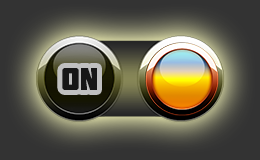
<style>
.page{position:relative;width:260px;height:160px}
.page>*{position:absolute;margin:0}
.t1{font:30.8px "Molot";color:#161616}
</style>
<div class="page">
<p class="t1" style="left:62px;top:68px;width:35px;height:22px">ON</p>
</div>
